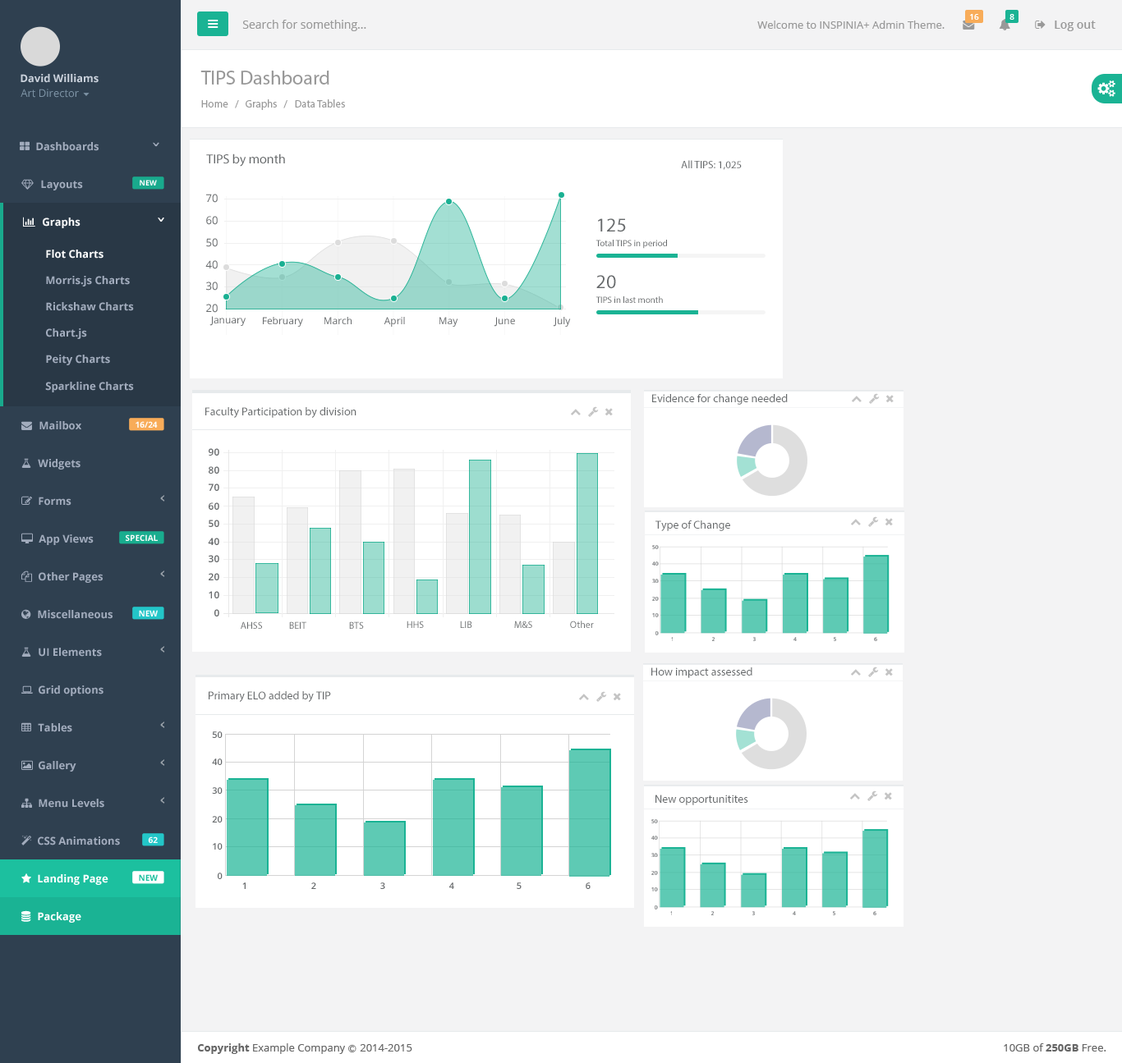
<style>
.page{position:relative;width:1122px;height:1063px;background:#ffffff}
.page>*{position:absolute;margin:0}
.t1{font:8.2px "OpenSans-Semibold";color:#ffffff}
.t2{font:11.5px "OpenSans";color:#999999}
.t3{font:10.7px "OpenSans";color:#999999}
.t4{font:11.5px "OpenSans-Semibold";color:#999999}
.t5{font:10.7px "OpenSans-Bold";color:#cad1db}
.t6{font:19.7px "MyriadPro-Regular";color:#999999}
.t7{font:10.7px "OpenSans";color:#7d93a5}
.t8{font:10.7px "MyriadPro-Regular";color:#999999}
.t9{font:10.7px "OpenSans-Bold";color:#a2acbd}
.t10{font:13.1px "MyriadPro-Regular";color:#676a6c}
.t11{font:10.7px "MyriadPro-Regular";color:#676a6c}
.t12{font:7.4px "OpenSans-Bold";color:#fefefe}
.t13{font:10.7px "OpenSans";color:#676a6c}
.t14{font:10.7px "OpenSans-Bold";color:#ffffff}
.t15{font:19.7px "MyriadPro-Regular";color:#676a6c}
.t16{font:9px "MyriadPro-Regular";color:#676a6c}
.t17{font:9.9px "OpenSans";color:#676a6c}
.t18{font:11.5px "MyriadPro-Regular";color:#676a6c}
.t19{font:8.2px "OpenSans-Bold";color:#fefefe}
.t20{font:9.9px "OpenSans-Semibold";color:#676a6c}
.t21{font:5.5px "OpenSans-Semibold"}
.t22{font:9.9px "MyriadPro-Regular";color:#676a6c}
.t23{font:9.9px "MyriadPro-Regular"}
.t24{font:9px "OpenSans-Semibold";color:#676a6c}
.t25{font:8.2px "OpenSans-Bold";color:#1cc09f}
.t26{font:10.7px "OpenSans";color:#666666}
.t27{font:10.7px "OpenSans-Bold";color:#666666}
.t28{font:8.2px "Meiryo";color:#666666}
</style>
<div class="page">
<p class="t1" style="left:970px;top:14px;width:9px;height:6px">16</p>
<p class="t1" style="left:1009px;top:14px;width:5px;height:6px">8</p>
<p class="t2" style="left:242px;top:20px;width:124px;height:11px">Search for something...</p>
<p class="t3" style="left:757px;top:21px;width:187px;height:8px">Welcome to INSPINIA+ Admin Theme.</p>
<p class="t4" style="left:1054px;top:21px;width:41px;height:10px">Log out</p>
<p class="t5" style="left:21px;top:74px;width:78px;height:9px">David Williams</p>
<p class="t6" style="left:200px;top:71px;width:129px;height:14px">TIPS Dashboard</p>
<p class="t7" style="left:21px;top:89px;width:58px;height:9px">Art Director</p>
<p class="t8" style="left:201px;top:99px;width:144px;height:11px">Home   /   Graphs   /   Data Tables</p>
<p class="t9" style="left:36px;top:142px;width:63px;height:9px">Dashboards</p>
<p class="t10" style="left:206px;top:154px;width:79px;height:13px">TIPS by month</p>
<p class="t11" style="left:681px;top:160px;width:60px;height:10px">All TIPS: 1,025</p>
<p class="t9" style="left:41px;top:180px;width:42px;height:10px">Layouts</p>
<p class="t12" style="left:140px;top:180px;width:17px;height:6px">NEW</p>
<p class="t13" style="left:206px;top:194px;width:12px;height:9px">70</p>
<p class="t14" style="left:43px;top:218px;width:37px;height:10px">Graphs</p>
<p class="t13" style="left:206px;top:216px;width:12px;height:9px">60</p>
<p class="t15" style="left:598px;top:218px;width:28px;height:14px">125</p>
<p class="t13" style="left:206px;top:238px;width:12px;height:9px">50</p>
<p class="t16" style="left:595px;top:240px;width:72px;height:9px">Total TIPS in period</p>
<p class="t14" style="left:46px;top:250px;width:57px;height:9px">Flot Charts</p>
<p class="t13" style="left:205px;top:260px;width:13px;height:9px">40</p>
<p class="t9" style="left:46px;top:276px;width:84px;height:11px">Morris.js Charts</p>
<p class="t13" style="left:206px;top:282px;width:12px;height:9px">30</p>
<p class="t15" style="left:596px;top:275px;width:20px;height:14px">20</p>
<p class="t9" style="left:46px;top:302px;width:88px;height:9px">Rickshaw Charts</p>
<p class="t13" style="left:206px;top:304px;width:12px;height:9px">20</p>
<p class="t16" style="left:595px;top:296px;width:68px;height:7px">TIPS in last month</p>
<p class="t17" style="left:209px;top:316px;width:36px;height:10px">January</p>
<p class="t17" style="left:263px;top:317px;width:40px;height:10px">February</p>
<p class="t17" style="left:324px;top:317px;width:27px;height:7px">March</p>
<p class="t17" style="left:383px;top:317px;width:22px;height:10px">April</p>
<p class="t17" style="left:439px;top:317px;width:19px;height:10px">May</p>
<p class="t17" style="left:493px;top:317px;width:22px;height:10px">June</p>
<p class="t17" style="left:553px;top:317px;width:18px;height:10px">July</p>
<p class="t9" style="left:46px;top:328px;width:41px;height:11px">Chart.js</p>
<p class="t9" style="left:46px;top:355px;width:64px;height:10px">Peity Charts</p>
<p class="t9" style="left:45px;top:382px;width:89px;height:10px">Sparkline Charts</p>
<p class="t18" style="left:652px;top:394px;width:135px;height:11px">Evidence for change needed</p>
<p class="t18" style="left:205px;top:407px;width:151px;height:11px">Faculty Participation by division</p>
<p class="t9" style="left:39px;top:421px;width:42px;height:9px">Mailbox</p>
<p class="t19" style="left:135px;top:421px;width:23px;height:7px">16/24</p>
<p class="t20" style="left:209px;top:448px;width:10px;height:8px">90</p>
<p class="t9" style="left:38px;top:459px;width:42px;height:11px">Widgets</p>
<p class="t20" style="left:209px;top:466px;width:10px;height:8px">80</p>
<p class="t20" style="left:209px;top:484px;width:10px;height:7px">70</p>
<p class="t9" style="left:39px;top:497px;width:32px;height:9px">Forms</p>
<p class="t20" style="left:209px;top:502px;width:10px;height:8px">60</p>
<p class="t20" style="left:209px;top:520px;width:10px;height:7px">50</p>
<p class="t18" style="left:655px;top:521px;width:75px;height:10px">Type of Change</p>
<p class="t9" style="left:39px;top:534px;width:55px;height:11px">App Views</p>
<p class="t19" style="left:126px;top:534px;width:32px;height:7px">SPECIAL</p>
<p class="t20" style="left:208px;top:538px;width:11px;height:7px">40</p>
<p class="t21" style="left:652px;top:545px;width:6px;height:4px">50</p>
<p class="t20" style="left:209px;top:555px;width:10px;height:7px">30</p>
<p class="t21" style="left:652px;top:562px;width:6px;height:4px">40</p>
<p class="t9" style="left:39px;top:572px;width:64px;height:11px">Other Pages</p>
<p class="t20" style="left:209px;top:573px;width:10px;height:7px">20</p>
<p class="t21" style="left:652px;top:579px;width:6px;height:4px">30</p>
<p class="t20" style="left:209px;top:591px;width:10px;height:8px">10</p>
<p class="t21" style="left:652px;top:597px;width:6px;height:4px">20</p>
<p class="t9" style="left:38px;top:610px;width:74px;height:9px">Miscellaneous</p>
<p class="t19" style="left:139px;top:610px;width:19px;height:7px">NEW</p>
<p class="t20" style="left:214px;top:609px;width:5px;height:8px">0</p>
<p class="t21" style="left:652px;top:613px;width:6px;height:4px">10</p>
<p class="t22" style="left:241px;top:622px;width:21px;height:7px">AHSS</p>
<p class="t22" style="left:289px;top:622px;width:17px;height:7px">BEIT</p>
<p class="t23" style="left:349px;top:622px;width:15px;height:7px">BTS</p>
<p class="t23" style="left:406px;top:621px;width:18px;height:7px">HHS</p>
<p class="t22" style="left:460px;top:621px;width:12px;height:7px">LIB</p>
<p class="t22" style="left:514px;top:621px;width:18px;height:7px">M&amp;S</p>
<p class="t22" style="left:570px;top:621px;width:24px;height:7px">Other</p>
<p class="t21" style="left:655px;top:631px;width:3px;height:4px">0</p>
<p class="t21" style="left:671px;top:637px;width:1px;height:4px">1</p>
<p class="t21" style="left:712px;top:637px;width:2px;height:4px">2</p>
<p class="t21" style="left:753px;top:637px;width:2px;height:4px">3</p>
<p class="t21" style="left:793px;top:637px;width:3px;height:4px">4</p>
<p class="t21" style="left:833px;top:637px;width:3px;height:4px">5</p>
<p class="t21" style="left:874px;top:637px;width:3px;height:4px">6</p>
<p class="t9" style="left:39px;top:648px;width:63px;height:9px">UI Elements</p>
<p class="t18" style="left:651px;top:667px;width:101px;height:11px">How impact assessed</p>
<p class="t9" style="left:39px;top:686px;width:64px;height:10px">Grid options</p>
<p class="t18" style="left:209px;top:691px;width:122px;height:11px">Primary ELO added by TIP</p>
<p class="t9" style="left:38px;top:723px;width:34px;height:9px">Tables</p>
<p class="t24" style="left:212px;top:732px;width:10px;height:6px">50</p>
<p class="t9" style="left:39px;top:761px;width:37px;height:11px">Gallery</p>
<p class="t24" style="left:212px;top:759px;width:10px;height:6px">40</p>
<p class="t24" style="left:212px;top:787px;width:10px;height:7px">30</p>
<p class="t18" style="left:655px;top:795px;width:93px;height:10px">New opportunitites</p>
<p class="t9" style="left:39px;top:799px;width:65px;height:9px">Menu Levels</p>
<p class="t24" style="left:212px;top:816px;width:10px;height:7px">20</p>
<p class="t21" style="left:651px;top:819px;width:7px;height:4px">50</p>
<p class="t9" style="left:38px;top:837px;width:82px;height:9px">CSS Animations</p>
<p class="t19" style="left:148px;top:837px;width:10px;height:6px">62</p>
<p class="t24" style="left:213px;top:843px;width:9px;height:7px">10</p>
<p class="t21" style="left:651px;top:836px;width:7px;height:4px">40</p>
<p class="t21" style="left:651px;top:853px;width:7px;height:4px">30</p>
<p class="t14" style="left:38px;top:874px;width:70px;height:11px">Landing Page</p>
<p class="t25" style="left:139px;top:874px;width:19px;height:7px">NEW</p>
<p class="t24" style="left:218px;top:873px;width:4px;height:6px">0</p>
<p class="t21" style="left:651px;top:871px;width:7px;height:4px">20</p>
<p class="t24" style="left:242px;top:883px;width:3px;height:6px">1</p>
<p class="t24" style="left:311px;top:883px;width:5px;height:6px">2</p>
<p class="t24" style="left:380px;top:883px;width:5px;height:6px">3</p>
<p class="t24" style="left:449px;top:883px;width:5px;height:6px">4</p>
<p class="t24" style="left:516px;top:883px;width:5px;height:6px">5</p>
<p class="t24" style="left:585px;top:883px;width:5px;height:6px">6</p>
<p class="t21" style="left:651px;top:888px;width:7px;height:4px">10</p>
<p class="t21" style="left:654px;top:906px;width:4px;height:4px">0</p>
<p class="t14" style="left:38px;top:912px;width:43px;height:11px">Package</p>
<p class="t21" style="left:670px;top:911px;width:2px;height:4px">1</p>
<p class="t21" style="left:711px;top:911px;width:2px;height:4px">2</p>
<p class="t21" style="left:752px;top:911px;width:3px;height:4px">3</p>
<p class="t21" style="left:792px;top:911px;width:4px;height:4px">4</p>
<p class="t21" style="left:833px;top:911px;width:2px;height:4px">5</p>
<p class="t21" style="left:873px;top:911px;width:3px;height:4px">6</p>
<p class="t26" style="left:197px;top:1044px;width:215px;height:10px"><span class="t27">Copyright</span> Example Company <span class="t28">Ⓒ </span>2014-2015</p>
<p class="t26" style="left:1003px;top:1044px;width:103px;height:8px">10GB of <span class="t27">250GB</span> Free.</p>
</div>
